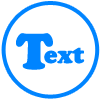
<style>
.page{position:relative;width:100px;height:100px;background:#ffffff}
.page>*{position:absolute;margin:0}
.t1{font:50px "CooperBlackStd";color:#0084ff}
.t2{font:24px "CooperBlackStd";color:#0084ff}
</style>
<div class="page">
<p class="t1" style="left:16px;top:33px;width:37px;height:37px">T</p>
<p class="t2" style="left:44px;top:47px;width:41px;height:17px">ext</p>
</div>
